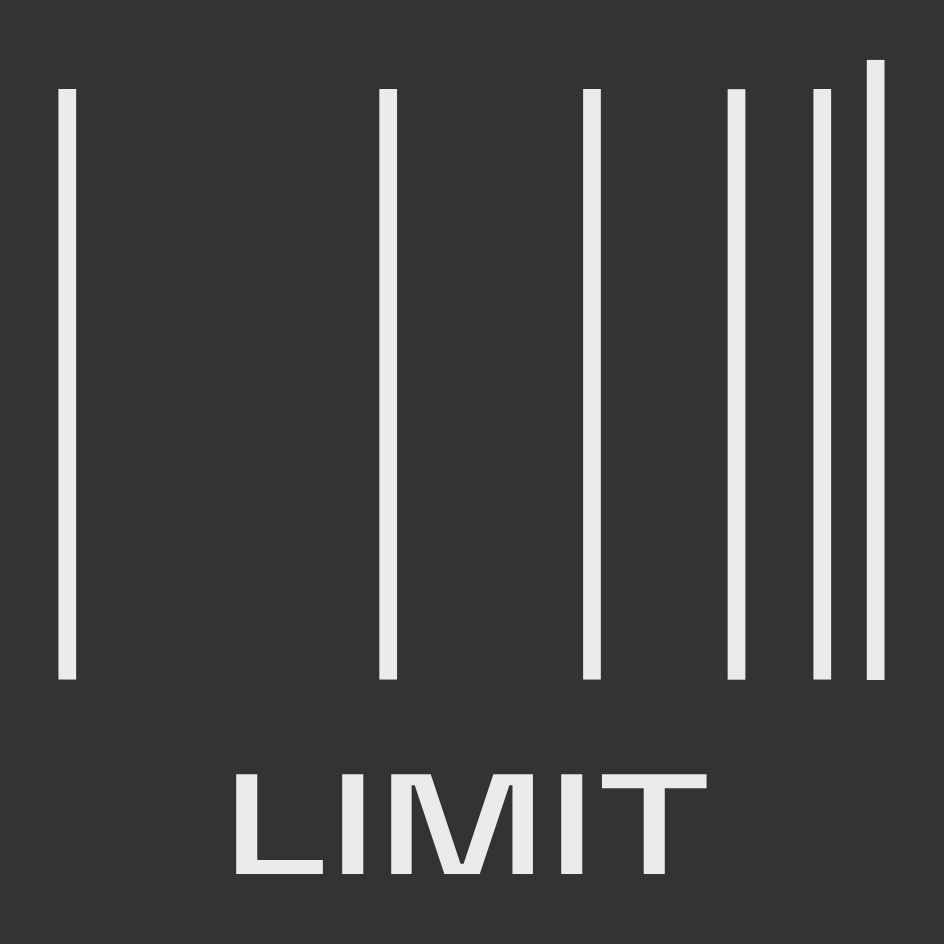
<style>
.page{position:relative;width:944px;height:944px;background:#333333}
.page>*{position:absolute;margin:0}
.t1{font:142.4px "SpaceGroteskLight-Medium";color:#ebebeb;scale:1.37 1}
</style>
<div class="page">
<p class="t1" style="left:236px;top:774px;width:471px;height:100px">LIMIT</p>
</div>
